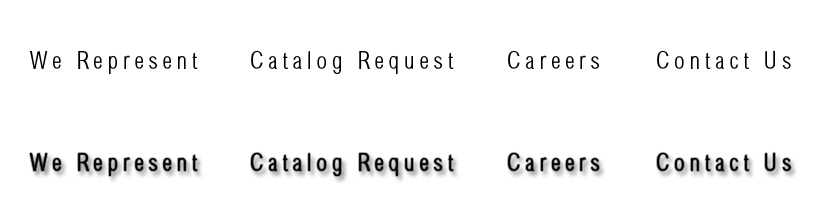
<style>
.page{position:relative;width:818px;height:205px;background:#ffffff}
.page>*{position:absolute;margin:0}
.t1{font:24px "Sertig";letter-spacing:0.2em;color:#000000}
</style>
<div class="page">
<p class="t1" style="left:30px;top:51px;width:168px;height:23px">We Represent</p>
<p class="t1" style="left:251px;top:50px;width:203px;height:24px">Catalog Request</p>
<p class="t1" style="left:508px;top:50px;width:91px;height:19px">Careers</p>
<p class="t1" style="left:657px;top:50px;width:134px;height:19px">Contact Us</p>
<p class="t1" style="left:30px;top:153px;width:168px;height:23px">We Represent</p>
<p class="t1" style="left:251px;top:152px;width:203px;height:24px">Catalog Request</p>
<p class="t1" style="left:508px;top:152px;width:91px;height:19px">Careers</p>
<p class="t1" style="left:657px;top:152px;width:134px;height:19px">Contact Us</p>
</div>
